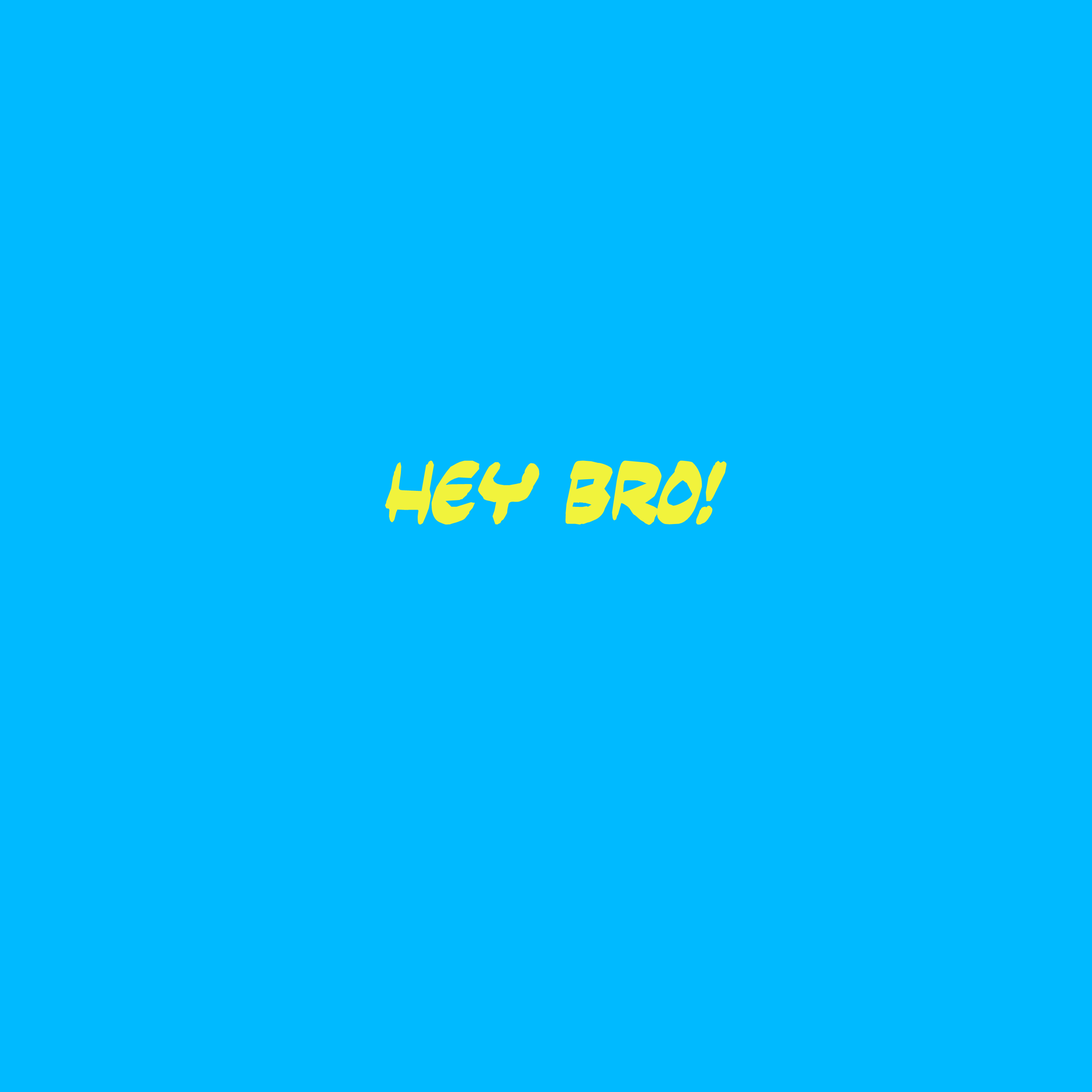
<style>
.page{position:relative;width:1092px;height:1092px;background:#00baff}
.page>*{position:absolute;margin:0}
.t1{font:64px "Yesterdaysmeal";color:#f1f33c}
</style>
<div class="page">
<p class="t1" style="left:385px;top:445px;width:342px;height:87px">Hey Bro!</p>
</div>
